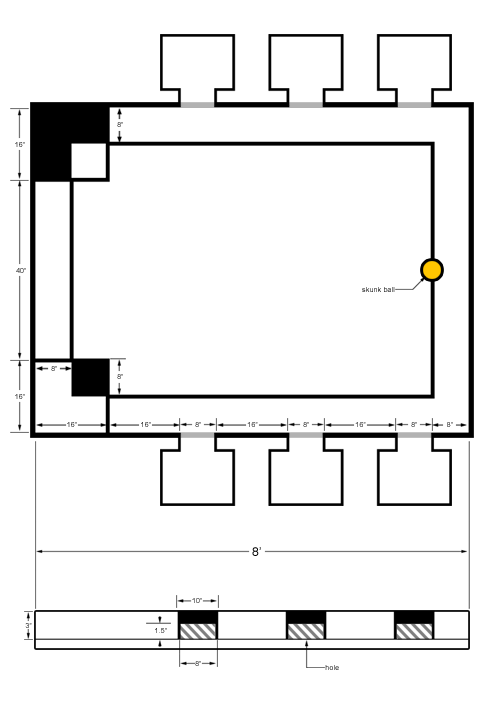
<style>
.page{position:relative;width:504px;height:720px;background:#ffffff}
.page>*{position:absolute;margin:0}
.t1{font:7px "ArialMT";letter-spacing:0.025em}
.t2{font:12px "ArialMT";letter-spacing:0.025em;color:#000000}
</style>
<div class="page">
<p class="t1" style="left:117px;top:122px;width:6px;height:5px">8”</p>
<p class="t1" style="left:15px;top:142px;width:10px;height:5px">16”</p>
<p class="t1" style="left:16px;top:268px;width:10px;height:5px">40”</p>
<p class="t1" style="left:362px;top:287px;width:33px;height:5px">skunk ball</p>
<p class="t1" style="left:51px;top:366px;width:6px;height:5px">8”</p>
<p class="t1" style="left:117px;top:374px;width:6px;height:5px">8”</p>
<p class="t1" style="left:15px;top:394px;width:10px;height:5px">16”</p>
<p class="t1" style="left:67px;top:422px;width:10px;height:5px">16”</p>
<p class="t1" style="left:141px;top:422px;width:10px;height:5px">16”</p>
<p class="t1" style="left:195px;top:422px;width:6px;height:5px">8”</p>
<p class="t1" style="left:247px;top:422px;width:11px;height:5px">16”</p>
<p class="t1" style="left:303px;top:422px;width:6px;height:5px">8”</p>
<p class="t1" style="left:355px;top:422px;width:11px;height:5px">16”</p>
<p class="t1" style="left:411px;top:422px;width:6px;height:5px">8”</p>
<p class="t1" style="left:447px;top:422px;width:6px;height:5px">8”</p>
<p class="t2" style="left:252px;top:547px;width:9px;height:9px">8’</p>
<p class="t1" style="left:192px;top:598px;width:10px;height:5px">10”</p>
<p class="t1" style="left:25px;top:623px;width:7px;height:5px">3”</p>
<p class="t1" style="left:155px;top:628px;width:12px;height:5px">1.5”</p>
<p class="t1" style="left:195px;top:661px;width:6px;height:5px">8”</p>
<p class="t1" style="left:325px;top:665px;width:14px;height:5px">hole</p>
</div>
